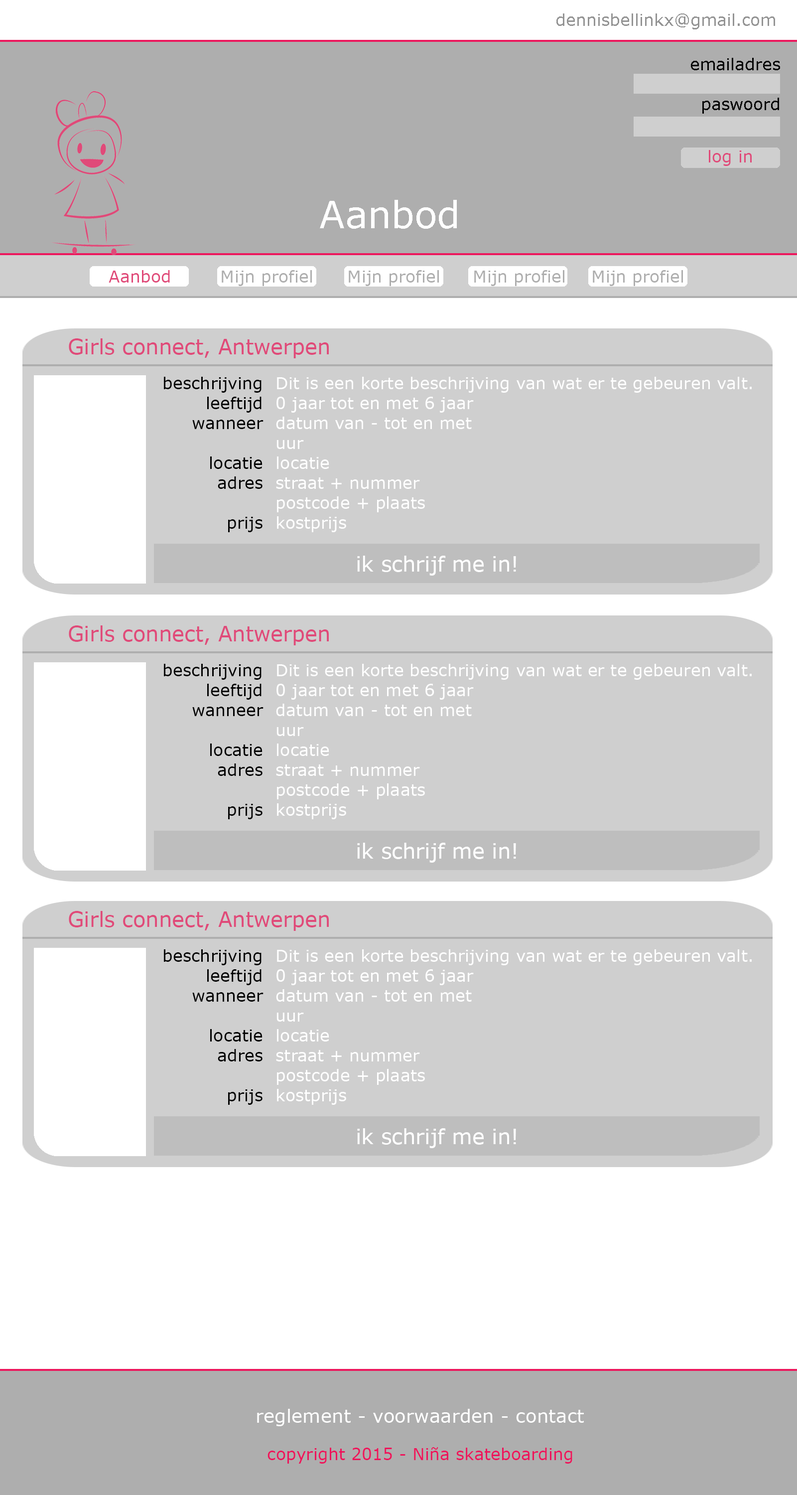
<style>
.page{position:relative;width:797px;height:1495px;background:#cfcfcf}
.page>*{position:absolute;margin:0}
.t1{font:16.6px "Verdana";color:#949494}
.t2{font:16.6px "Verdana";color:#000000}
.t3{font:16.6px "Verdana";color:#e04a79}
.t4{font:37.4px "Verdana";color:#ffffff}
.t5{font:16.6px "Verdana";color:#aeaeae}
.t6{font:20.8px "Verdana";color:#e04a79}
.t7{font:16.6px "Verdana";color:#ffffff}
.t8{font:20.8px "Verdana";color:#ffffff}
.t9{font:18.7px "Verdana";color:#ffffff}
.t10{font:16.6px "Verdana";color:#ee145b}
</style>
<div class="page">
<p class="t1" style="left:557px;top:13px;width:219px;height:16px">dennisbellinkx@gmail.com</p>
<p class="t2" style="left:691px;top:58px;width:90px;height:56px;text-align:right">emailadres<br><br>paswoord</p>
<p class="t3" style="left:709px;top:150px;width:43px;height:16px">log in</p>
<p class="t4" style="left:320px;top:200px;width:137px;height:29px">Aanbod</p>
<p class="t3" style="left:109px;top:270px;width:61px;height:13px">Aanbod</p>
<p class="t5" style="left:222px;top:270px;width:90px;height:16px">Mijn profiel</p>
<p class="t5" style="left:349px;top:270px;width:90px;height:16px">Mijn profiel</p>
<p class="t5" style="left:474px;top:270px;width:91px;height:16px">Mijn profiel</p>
<p class="t5" style="left:593px;top:270px;width:90px;height:16px">Mijn profiel</p>
<p class="t6" style="left:69px;top:338px;width:260px;height:20px">Girls connect, Antwerpen</p>
<p class="t2" style="left:164px;top:377px;width:100px;height:155px;text-align:right">beschrijving<br>leeftijd<br>wanneer<br><br>locatie<br>adres<br><br>prijs</p>
<p class="t7" style="left:276px;top:377px;width:476px;height:155px">Dit is een korte beschrijving van wat er te gebeuren valt.<br>0 jaar tot en met 6 jaar<br>datum van - tot en met<br>uur<br>locatie<br>straat + nummer<br>postcode + plaats<br>kostprijs</p>
<p class="t8" style="left:357px;top:556px;width:159px;height:20px">ik schrijf me in!</p>
<p class="t6" style="left:69px;top:626px;width:260px;height:19px">Girls connect, Antwerpen</p>
<p class="t2" style="left:164px;top:664px;width:100px;height:155px;text-align:right">beschrijving<br>leeftijd<br>wanneer<br><br>locatie<br>adres<br><br>prijs</p>
<p class="t7" style="left:276px;top:664px;width:476px;height:155px">Dit is een korte beschrijving van wat er te gebeuren valt.<br>0 jaar tot en met 6 jaar<br>datum van - tot en met<br>uur<br>locatie<br>straat + nummer<br>postcode + plaats<br>kostprijs</p>
<p class="t8" style="left:357px;top:843px;width:159px;height:20px">ik schrijf me in!</p>
<p class="t6" style="left:69px;top:911px;width:260px;height:20px">Girls connect, Antwerpen</p>
<p class="t2" style="left:164px;top:949px;width:100px;height:156px;text-align:right">beschrijving<br>leeftijd<br>wanneer<br><br>locatie<br>adres<br><br>prijs</p>
<p class="t7" style="left:276px;top:949px;width:476px;height:156px">Dit is een korte beschrijving van wat er te gebeuren valt.<br>0 jaar tot en met 6 jaar<br>datum van - tot en met<br>uur<br>locatie<br>straat + nummer<br>postcode + plaats<br>kostprijs</p>
<p class="t8" style="left:357px;top:1128px;width:159px;height:20px">ik schrijf me in!</p>
<p class="t9" style="left:257px;top:1409px;width:327px;height:17px">reglement - voorwaarden - contact</p>
<p class="t10" style="left:268px;top:1447px;width:305px;height:17px">copyright 2015 - Niña skateboarding</p>
</div>
